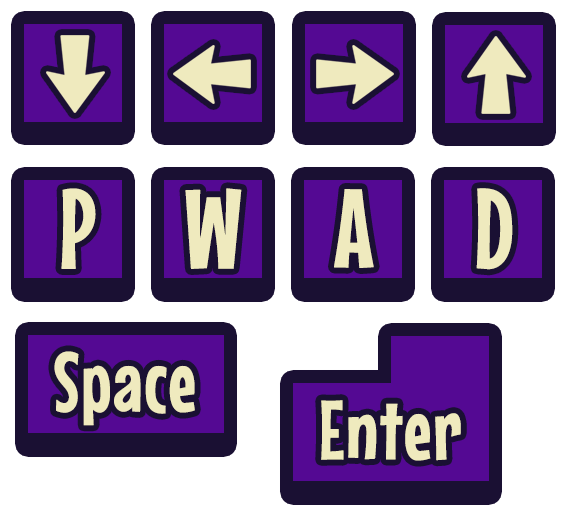
<style>
.page{position:relative;width:572px;height:524px;background:#1a1033}
.page>*{position:absolute;margin:0}
.t1{font:111.1px "MouseMemoirs-Regular";color:#efeabe;font-weight:bold}
.t2{font:83.3px "MouseMemoirs-Regular";color:#efeabe;font-weight:bold}
</style>
<div class="page">
<p class="t1" style="left:61px;top:188px;width:35px;height:81px">P</p>
<p class="t1" style="left:185px;top:188px;width:57px;height:81px">W</p>
<p class="t1" style="left:334px;top:189px;width:40px;height:79px">A</p>
<p class="t1" style="left:476px;top:188px;width:37px;height:82px">D</p>
<p class="t2" style="left:54px;top:351px;width:141px;height:75px">Space</p>
<p class="t2" style="left:321px;top:400px;width:140px;height:61px">Enter</p>
</div>
